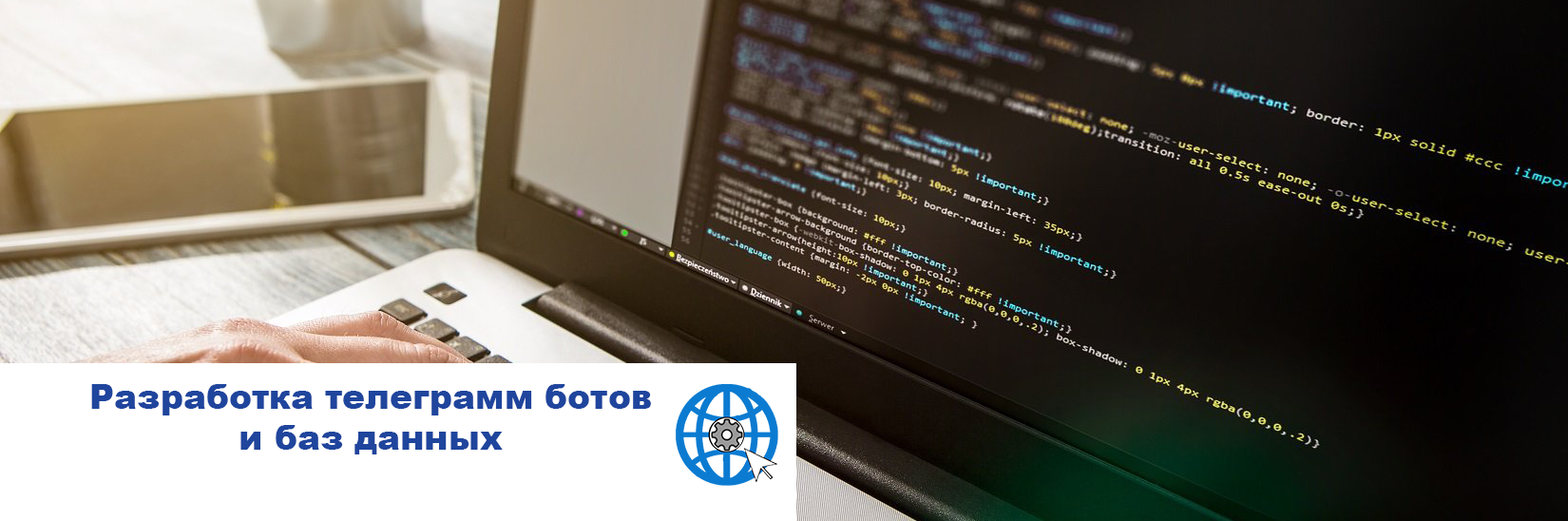
<style>
.page{position:relative;width:1568px;height:521px}
.page>*{position:absolute;margin:0}
.t1{font:34.2px "Arial-Black";color:#1f459d}
</style>
<div class="page">
<p class="t1" style="left:91px;top:384px;width:560px;height:70px;text-align:center">Разработка телеграмм ботов<br>и баз данных</p>
</div>
